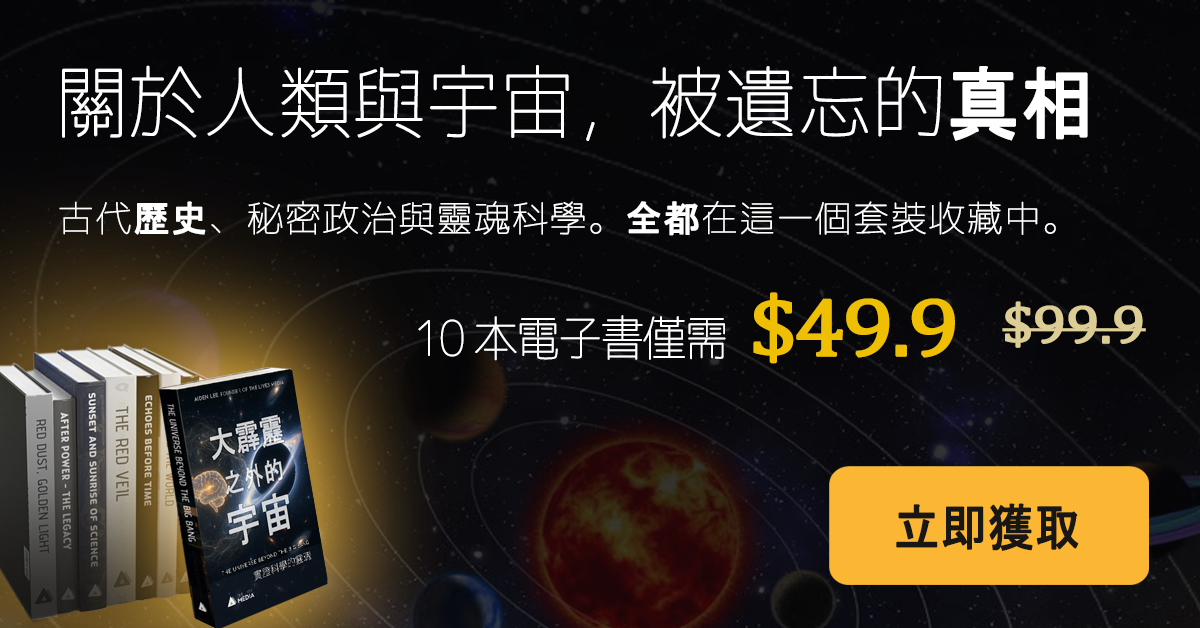
<style>
.page{position:relative;width:1200px;height:628px}
.page>*{position:absolute;margin:0}
.t1{font:79.2px "Chogokuboso-Gothic";letter-spacing:0.005em;color:#ffffff;font-weight:bold;scale:0.91 1}
.t2{font:79.2px "MS-Gothic";letter-spacing:0.005em;color:#ffffff;font-weight:bold;scale:0.91 1}
.t3{font:36px "Chogokuboso-Gothic";letter-spacing:0.025em;color:#ffffff;font-weight:bold}
.t4{font:36px "MS-Gothic";letter-spacing:0.025em;color:#ffffff;font-weight:bold}
.t5{font:48px "Chogokuboso-Gothic";letter-spacing:-0.05em;color:#ffffff;font-weight:bold;scale:0.9 1}
.t6{font:82.8px "Cambria";letter-spacing:-0.05em;color:#efbf04;font-weight:bold;scale:1.11 1}
.t7{font:54px "Cambria";letter-spacing:-0.025em;color:#dbcd95;font-weight:bold;scale:1.11 1}
.t8{font:50.3px "MS-Gothic";letter-spacing:0.005em;color:#191616;font-weight:bold;scale:0.9 1}
</style>
<div class="page">
<p class="t1" style="left:62px;top:65px;width:1026px;height:76px">關於人類與宇宙，被遺忘的<span class="t2">真相</span></p>
<p class="t3" style="left:59px;top:200px;width:997px;height:36px">古代<span class="t4">歷史</span>、秘密政治與靈魂科學。<span class="t4">全都</span>在這一個套裝收藏中。</p>
<p class="t5" style="left:418px;top:292px;width:537px;height:72px">10 本電子書僅需  <span class="t6">$49.9</span></p>
<p class="t7" style="left:1002px;top:301px;width:144px;height:47px">$99.9</p>
<p class="t8" style="left:896px;top:503px;width:183px;height:48px">立即獲取</p>
</div>
